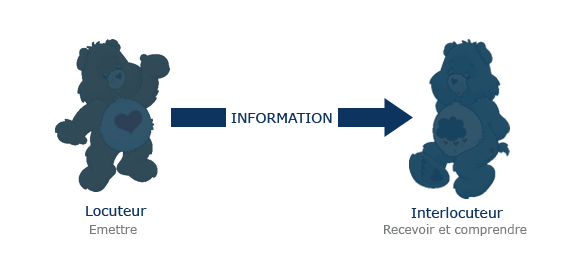
<style>
.page{position:relative;width:564px;height:275px;background:#ffffff}
.page>*{position:absolute;margin:0}
.t1{font:14px "Verdana";color:#0d335f}
.t2{font:12px "Verdana";color:#787b7d}
</style>
<div class="page">
<p class="t1" style="left:231px;top:113px;width:101px;height:10px">INFORMATION</p>
<p class="t1" style="left:86px;top:206px;width:61px;height:10px">Locuteur</p>
<p class="t1" style="left:411px;top:207px;width:92px;height:11px">Interlocuteur</p>
<p class="t2" style="left:90px;top:225px;width:47px;height:9px">Emettre</p>
<p class="t2" style="left:384px;top:224px;width:143px;height:12px">Recevoir et comprendre</p>
</div>
